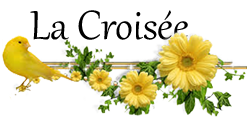
<style>
.page{position:relative;width:247px;height:126px;background:#ffffff}
.page>*{position:absolute;margin:0}
.t1{font:50px "Gabriola";color:#000000}
</style>
<div class="page">
<p class="t1" style="left:30px;top:10px;width:158px;height:30px">La Croisée</p>
</div>
